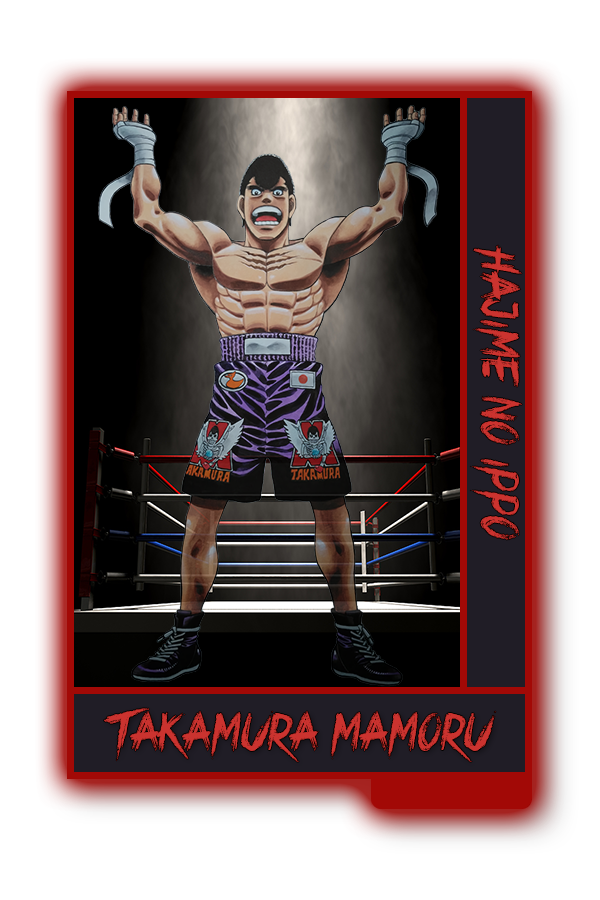
<style>
.page{position:relative;width:600px;height:900px;background:#ffffff}
.page>*{position:absolute;margin:0}
.t1{font:54.2px "CrimesTimesSix";color:#cb332f}
</style>
<div class="page">
<p class="t1" style="left:470px;top:245px;width:52px;height:295px;rotate:90deg">Hajime No Ippo</p>
<p class="t1" style="left:104px;top:708px;width:392px;height:54px">Takamura Mamoru</p>
</div>
